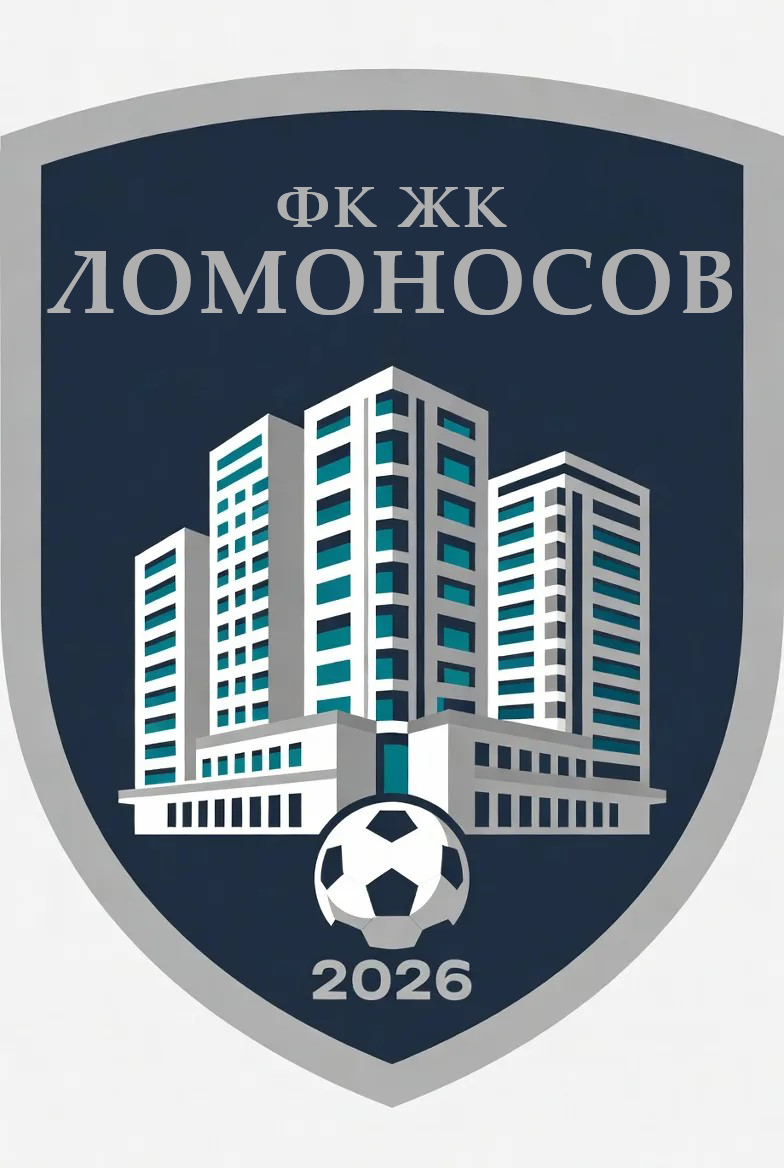
<style>
.page{position:relative;width:784px;height:1168px}
.page>*{position:absolute;margin:0}
.t1{font:58px "PalatinoLinotype-Bold";letter-spacing:0.035em;color:#afafaf}
.t2{font:91px "PalatinoLinotype-Bold";letter-spacing:0.035em;color:#afafaf}
</style>
<div class="page">
<p class="t1" style="left:277px;top:187px;width:230px;height:40px">ФК ЖК</p>
<p class="t2" style="left:47px;top:249px;width:685px;height:66px">ЛОМОНОСОВ</p>
</div>
